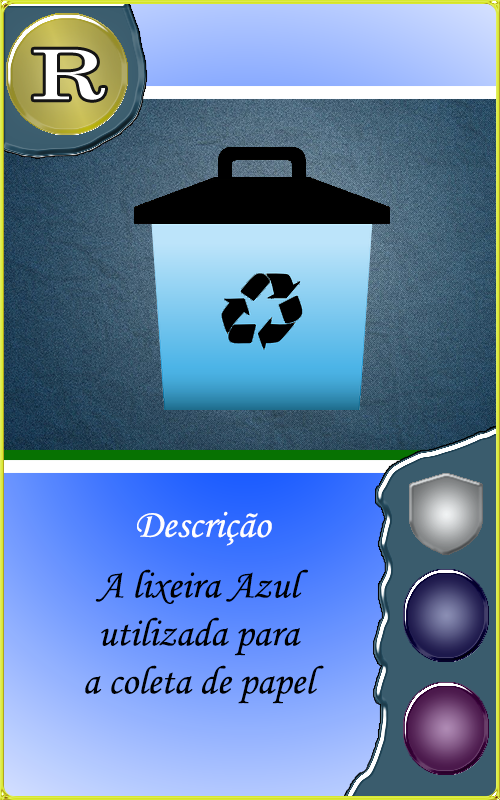
<style>
.page{position:relative;width:500px;height:800px}
.page>*{position:absolute;margin:0}
.t1{font:40px "MonotypeCorsiva";color:#fffefe}
.t2{font:40px "MonotypeCorsiva";color:#000000}
</style>
<div class="page">
<p class="t1" style="left:137px;top:511px;width:135px;height:35px">Descrição</p>
<p class="t2" style="left:85px;top:569px;width:239px;height:135px;text-align:center">A lixeira Azul<br>utilizada para<br>a coleta de papel</p>
</div>
